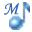
<style>
.page{position:relative;width:32px;height:32px;background:#ffffff}
.page>*{position:absolute;margin:0}
.t1{font:18px "MonotypeCorsiva";color:#3169b5}
</style>
<div class="page">
<p class="t1" style="left:4px;top:2px;width:15px;height:13px">M</p>
</div>
